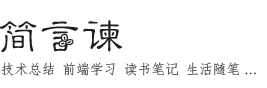
<style>
.page{position:relative;width:267px;height:88px;background:#ffffff}
.page>*{position:absolute;margin:0}
.t1{font:38px "-";color:#202020}
.t2{font:14px "·ÂËÎ";letter-spacing:-0.02em;color:#444444}
.t3{font:14px "·ÂËÎ";letter-spacing:-0.2em;color:#444444}
</style>
<div class="page">
<p class="t1" style="left:0px;top:20px;width:123px;height:32px">简言谏</p>
<p class="t2" style="left:1px;top:62px;width:255px;height:14px">技术总结 前端学习 读书笔记 生活随笔 <span class="t3">...</span></p>
</div>
